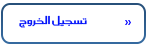
<style>
.page{position:relative;width:147px;height:46px;background:#ffffff}
.page>*{position:absolute;margin:0}
.t1{font:13px "SC_KHALID";color:#0314fa;scale:1.12 1}
</style>
<div class="page">
<p class="t1" style="left:19px;top:15px;width:68px;height:13px">تسجيل الخروج</p>
</div>
